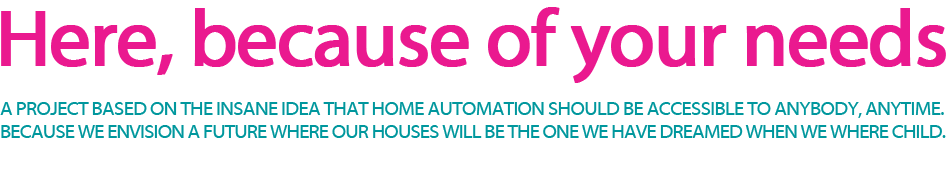
<style>
.page{position:relative;width:946px;height:170px;background:#ffffff}
.page>*{position:absolute;margin:0}
.t1{font:80.5px "MyriadWebPro";letter-spacing:-0.04em;color:#ea198f;font-weight:bold}
.t2{font:20.3px "MyriadWebPro";letter-spacing:-0.04em;color:#00979d}
.t3{font:19.9px "MyriadWebPro";letter-spacing:-0.04em;color:#00979d}
</style>
<div class="page">
<p class="t1" style="left:1px;top:7px;width:945px;height:76px">Here, because of your needs</p>
<p class="t2" style="left:0px;top:102px;width:944px;height:16px">A PROJECT BASED ON THE INSANE IDEA THAT HOME AUTOMATION SHOULD BE ACCESSIBLE TO ANYBODY, ANYTIME.</p>
<p class="t3" style="left:1px;top:125px;width:945px;height:13px">BECAUSE WE ENVISION A FUTURE WHERE OUR HOUSES WILL BE THE ONE WE HAVE DREAMED WHEN WE WHERE CHILD.</p>
</div>
